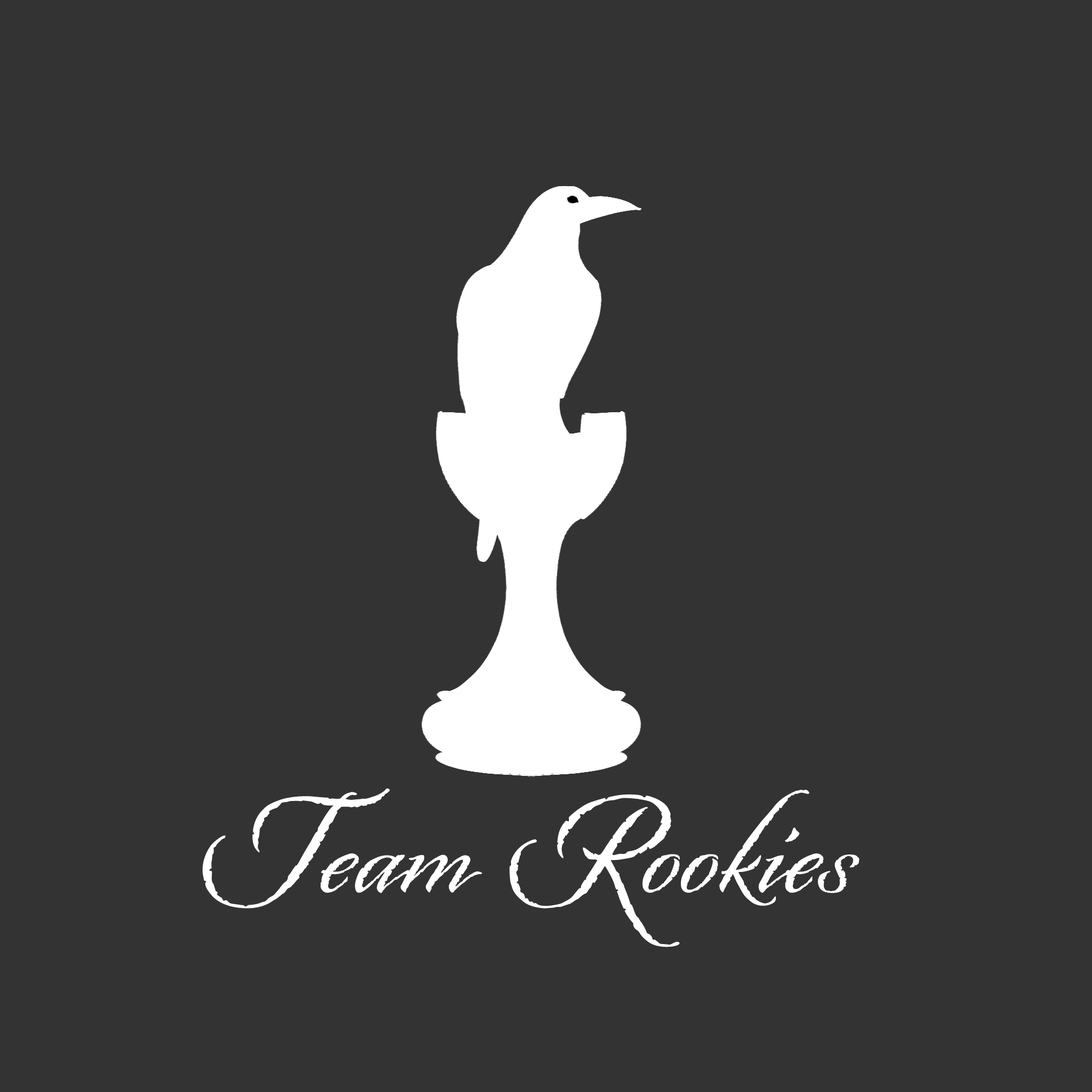
<style>
.page{position:relative;width:1092px;height:1092px;background:#333333}
.page>*{position:absolute;margin:0}
.t1{font:136.5px "Origins";letter-spacing:0.025em;color:#ffffff}
</style>
<div class="page">
<p class="t1" style="left:203px;top:788px;width:656px;height:159px">Team Rookies</p>
</div>
